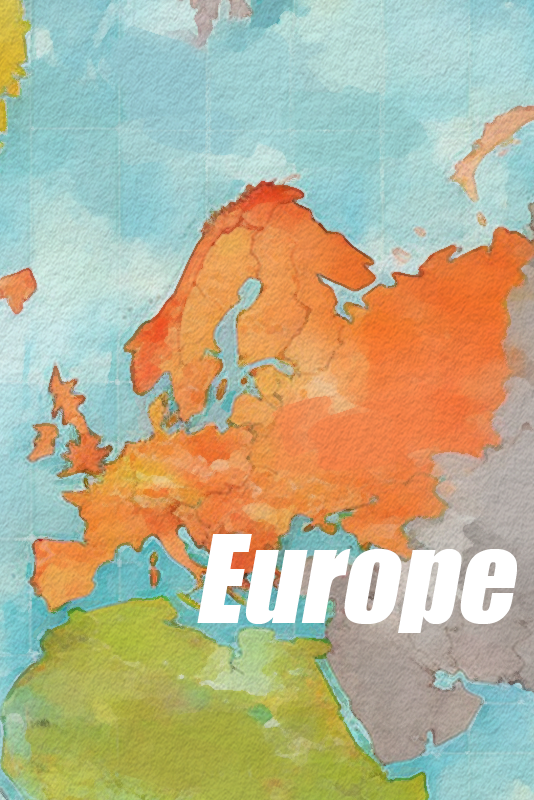
<style>
.page{position:relative;width:534px;height:800px}
.page>*{position:absolute;margin:0}
.t1{font:112px "Impact";color:#ffffff;font-style:italic}
</style>
<div class="page">
<p class="t1" style="left:197px;top:534px;width:320px;height:99px">Europe</p>
</div>
